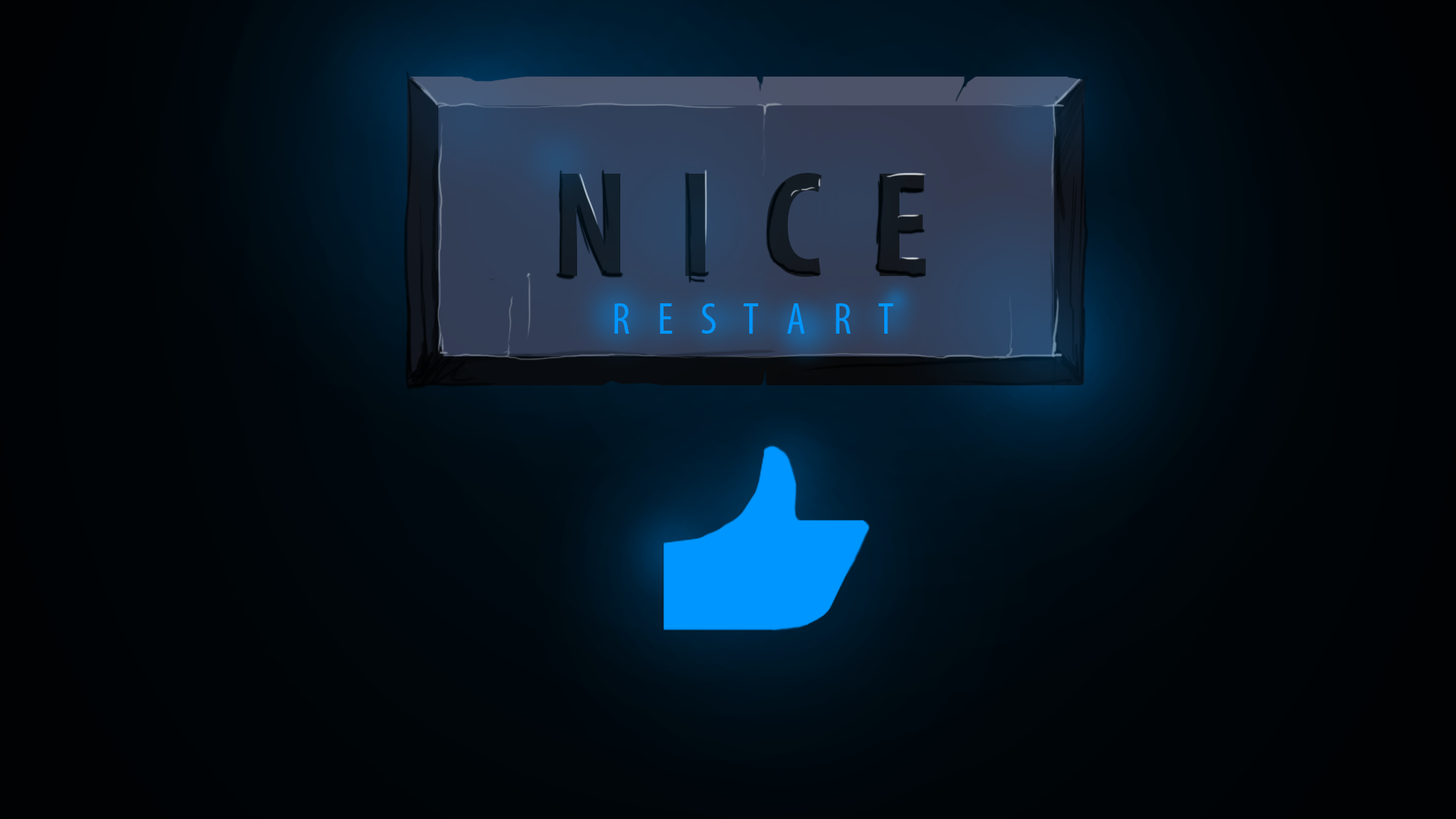
<style>
.page{position:relative;width:1456px;height:819px}
.page>*{position:absolute;margin:0}
.t1{font:151.7px "MyriadPro-BoldCond";color:#141519}
.t2{font:44.2px "MyriadPro-Cond";color:#0096ff}
</style>
<div class="page">
<p class="t1" style="left:560px;top:173px;width:366px;height:104px">N  I  C  E</p>
<p class="t2" style="left:614px;top:303px;width:279px;height:31px">R    E    S    T    A    R    T</p>
</div>
